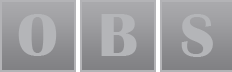
<style>
.page{position:relative;width:232px;height:72px}
.page>*{position:absolute;margin:0}
.t1{font:63px "BritannicBold";letter-spacing:0.66em;color:#b4b5b8}
.t2{font:63px "BritannicBold";letter-spacing:0.64em;color:#b4b5b8}
</style>
<div class="page">
<p class="t1" style="left:18px;top:14px;width:195px;height:43px"><span class="t2">O</span>BS</p>
</div>
